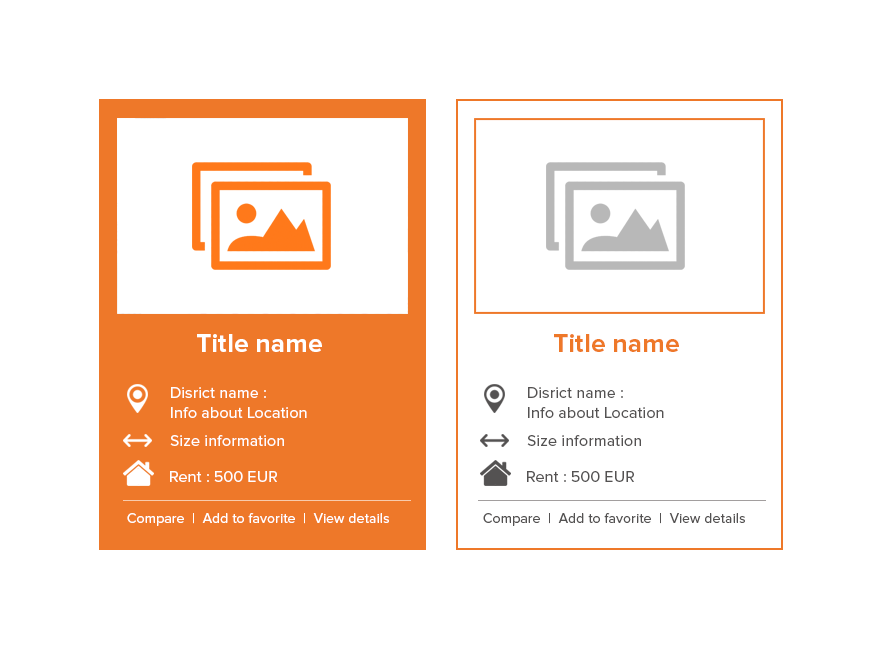
<style>
.page{position:relative;width:883px;height:658px;background:#ffffff}
.page>*{position:absolute;margin:0}
.t1{font:26px "ProximaNova-Bold";letter-spacing:0.01em;color:#ffffff}
.t2{font:26px "ProximaNova-Bold";letter-spacing:0.01em;color:#ee7829}
.t3{font:16px/20px "ProximaNova-Regular";letter-spacing:0.01em;color:#ffffff}
.t4{font:16px/20px "ProximaNova-Regular";letter-spacing:0.01em;color:#545252}
.t5{font:16px "ProximaNova-Regular";letter-spacing:0.01em;color:#ffffff}
.t6{font:16px "ProximaNova-Regular";letter-spacing:0.01em;color:#545252}
.t7{font:14px "ProximaNova-Regular";letter-spacing:0.01em;color:#ffffff}
.t8{font:14px "ProximaNova-Regular";letter-spacing:0.01em;color:#545252}
</style>
<div class="page">
<p class="t1" style="left:197px;top:334px;width:125px;height:18px">Title name</p>
<p class="t2" style="left:554px;top:334px;width:125px;height:18px">Title name</p>
<p class="t3" style="left:171px;top:387px;width:136px;height:31px">Disrict name :<br>Info about Location</p>
<p class="t4" style="left:528px;top:387px;width:136px;height:31px">Disrict name :<br>Info about Location</p>
<p class="t5" style="left:170px;top:435px;width:114px;height:11px">Size information</p>
<p class="t6" style="left:527px;top:435px;width:114px;height:11px">Size information</p>
<p class="t5" style="left:170px;top:471px;width:107px;height:11px">Rent : 500 EUR</p>
<p class="t6" style="left:527px;top:471px;width:107px;height:11px">Rent : 500 EUR</p>
<p class="t7" style="left:127px;top:513px;width:262px;height:13px">Compare  |  Add to favorite  |  View details</p>
<p class="t8" style="left:483px;top:513px;width:262px;height:13px">Compare  |  Add to favorite  |  View details</p>
</div>
